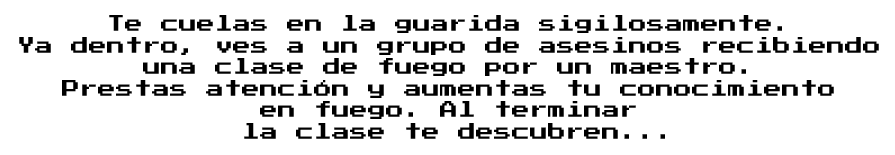
<style>
.page{position:relative;width:895px;height:155px;background:#ffffff}
.page>*{position:absolute;margin:0}
.t1{font:18px "PressStart2P";color:#000000}
</style>
<div class="page">
<p class="t1" style="left:19px;top:15px;width:860px;height:124px;text-align:center">Te cuelas en la guarida sigilosamente. <br>Ya dentro, ves a un grupo de asesinos recibiendo <br>una clase de fuego por un maestro. <br>Prestas atención y aumentas tu conocimiento <br>en fuego. Al terminar <br>la clase te descubren...</p>
</div>
